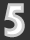
<style>
.page{position:relative;width:30px;height:40px;background:#333333}
.page>*{position:absolute;margin:0}
.t1{font:50px "Bauhaus93";letter-spacing:0.2em}
</style>
<div class="page">
<p class="t1" style="left:4px;top:3px;width:21px;height:35px">5</p>
</div>
